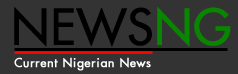
<style>
.page{position:relative;width:238px;height:74px;background:#333333}
.page>*{position:absolute;margin:0}
.t1{font:48px "FuturaExtended";color:#000000;font-weight:bold}
.t2{font:48px "FuturaExtended";color:#098600;font-weight:bold}
.t3{font:12px "FuturaExtended";letter-spacing:0.05em;color:#ffffff;font-weight:bold}
</style>
<div class="page">
<p class="t1" style="left:14px;top:7px;width:217px;height:40px">NEWS<span class="t2">NG</span></p>
<p class="t3" style="left:14px;top:57px;width:137px;height:14px">Current Nigerian News</p>
</div>
